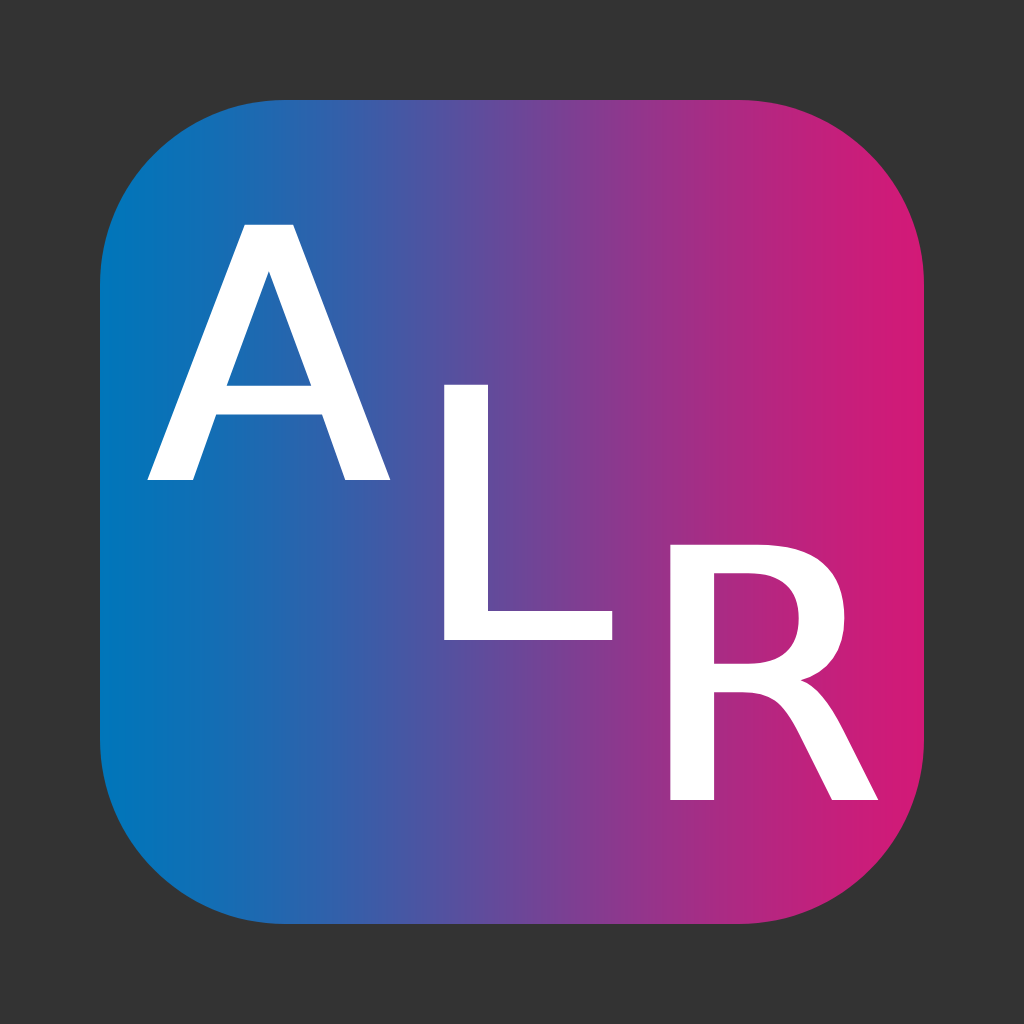
<style>
.page{position:relative;width:1024px;height:1024px;background:#333333}
.page>*{position:absolute;margin:0}
.t1{font:350px "Helvetica Neue";color:#ffffff;font-weight:bold}
</style>
<div class="page">
<p class="t1" style="left:147px;top:224px;width:244px;height:256px">A</p>
<p class="t1" style="left:444px;top:384px;width:169px;height:256px">L</p>
<p class="t1" style="left:670px;top:544px;width:209px;height:256px">R</p>
</div>
